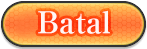
<style>
.page{position:relative;width:147px;height:49px}
.page>*{position:absolute;margin:0}
.t1{font:30px "RyuminPro-ExBold";color:#fff6f2;scale:0.95 1}
</style>
<div class="page">
<p class="t1" style="left:38px;top:10px;width:72px;height:24px">Batal</p>
</div>
